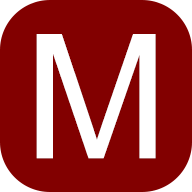
<style>
.page{position:relative;width:192px;height:192px;background:#820000}
.page>*{position:absolute;margin:0}
.t1{font:173.3px "ArialMT";color:#ffffff}
</style>
<div class="page">
<p class="t1" style="left:36px;top:34px;width:120px;height:125px">M</p>
</div>
